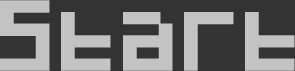
<style>
.page{position:relative;width:295px;height:71px;background:#333333}
.page>*{position:absolute;margin:0}
.t1{font:58.1px "Pixeled";color:#c3c3c3;font-weight:bold}
</style>
<div class="page">
<p class="t1" style="left:0px;top:0px;width:295px;height:71px">Start</p>
</div>
